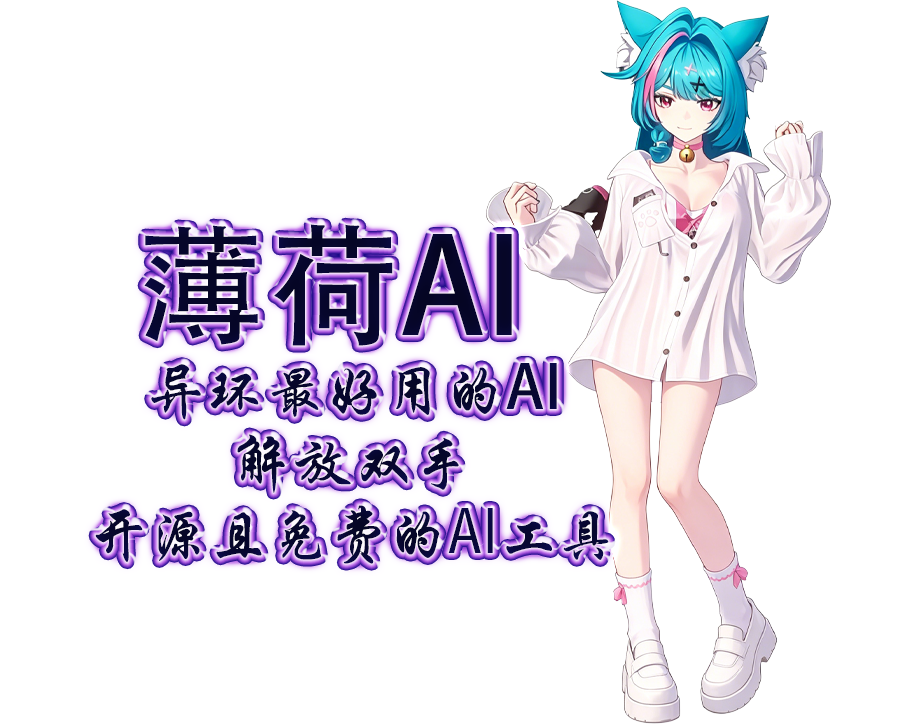
<style>
.page{position:relative;width:897px;height:724px;background:#ffffff}
.page>*{position:absolute;margin:0}
.t1{font:131.9px "AdobeHeitiStd-Regular";color:#06062c}
.t2{font:60.1px "STXingkai";color:#070733}
.t3{font:60.1px "AdobeHeitiStd-Regular";color:#070733}
.t4{font:60.1px "FZYTK--GBK1-0";color:#070733}
</style>
<div class="page">
<p class="t1" style="left:144px;top:224px;width:368px;height:122px">薄荷AI</p>
<p class="t2" style="left:95px;top:363px;width:514px;height:201px;text-align:center">异环最好用的<span class="t3">AI<br></span>解放双手<br>开源且免费的<span class="t4">AI</span>工具</p>
</div>
